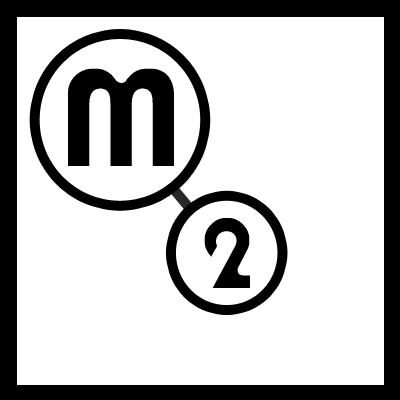
<style>
.page{position:relative;width:400px;height:400px;background:#ffffff}
.page>*{position:absolute;margin:0}
.t1{font:160.1px "Bauhaus93";color:#000000;scale:1.05 1}
.t2{font:117.3px "Bauhaus93"}
</style>
<div class="page">
<p class="t1" style="left:61px;top:62px;width:119px;height:110px">M</p>
<p class="t2" style="left:199px;top:213px;width:56px;height:80px">2</p>
</div>
